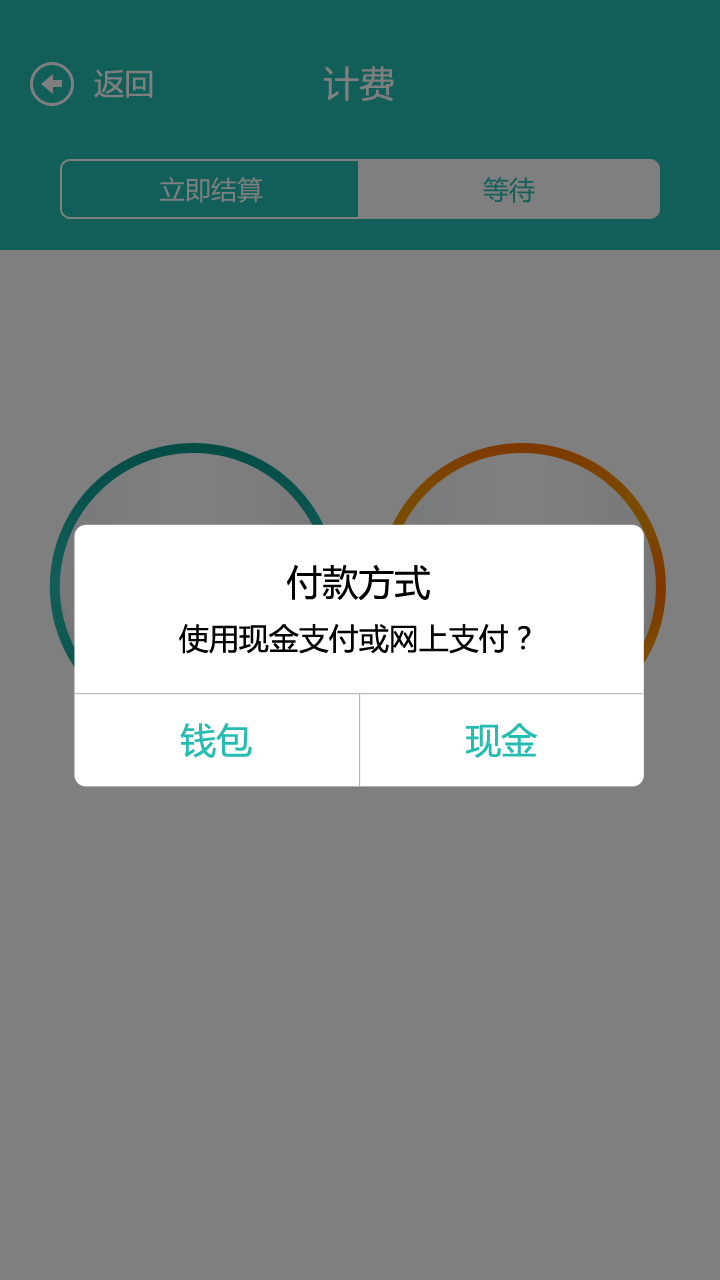
<style>
.page{position:relative;width:720px;height:1280px;background:#7f7f7f}
.page>*{position:absolute;margin:0}
.t1{font:30px "MicrosoftYaHei";color:#7f7f7f}
.t2{font:36px "MicrosoftYaHei";color:#7f7f7f}
.t3{font:26px "MicrosoftYaHei";color:#7f7f7f}
.t4{font:26px "MicrosoftYaHei";color:#125e58}
.t5{font:36px "MicrosoftYaHei";color:#000000}
.t6{font:30px "MicrosoftYaHei";color:#000000}
.t7{font:36px "MicrosoftYaHei";color:#25bdb0}
</style>
<div class="page">
<p class="t1" style="left:94px;top:69px;width:59px;height:29px">返回</p>
<p class="t2" style="left:323px;top:66px;width:71px;height:36px">计费</p>
<p class="t3" style="left:159px;top:177px;width:104px;height:26px">立即结算</p>
<p class="t4" style="left:483px;top:177px;width:52px;height:26px">等待</p>
<p class="t5" style="left:287px;top:565px;width:143px;height:35px">付款方式</p>
<p class="t6" style="left:179px;top:624px;width:352px;height:30px">使用现金支付或网上支付？</p>
<p class="t7" style="left:180px;top:723px;width:72px;height:35px">钱包</p>
<p class="t7" style="left:465px;top:723px;width:72px;height:35px">现金</p>
</div>
